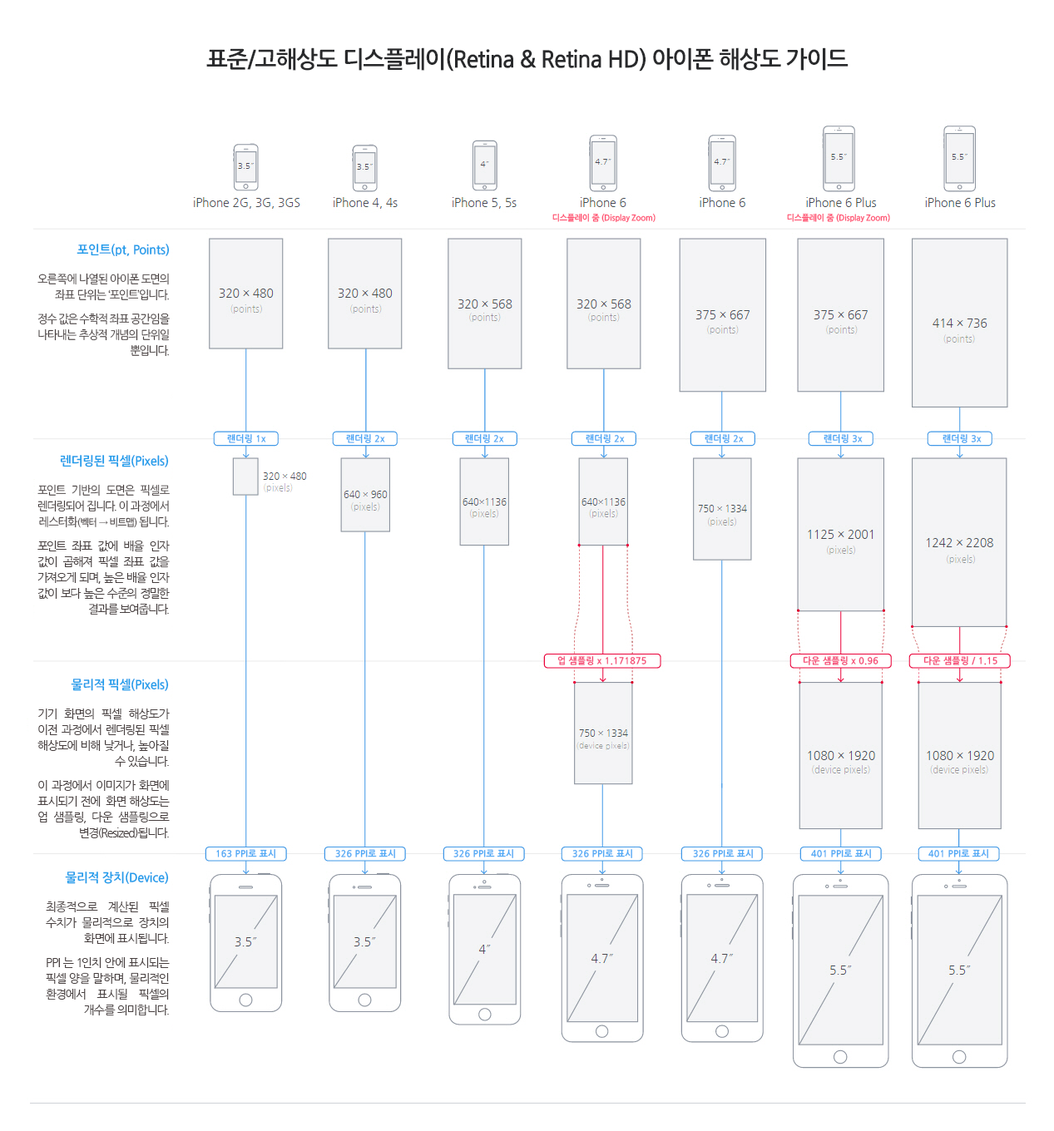
<style>
.page{position:relative;width:1054px;height:1131px;background:#ffffff}
.page>*{position:absolute;margin:0}
.t1{font:23.3px "NanumGothicBold";letter-spacing:-0.04em;color:#292a2c}
.t2{font:8.3px "NanumGothicBold";letter-spacing:-0.02em;color:#ff5273}
.t3{font:12.5px "NanumGothicBold";letter-spacing:-0.02em;color:#219deb}
.t4{font:11.6px/15.8px "NanumGothic";letter-spacing:-0.061em;color:#473f3f;scale:0.94 1}
.t5{font:11.6px/15.8px "NanumGothic";letter-spacing:-0.05em;color:#473f3f;scale:0.94 1}
.t6{font:9.2px "NanumGothicBold";letter-spacing:0.02em;color:#4ea8f5}
.t7{font:11.6px/15.8px "NanumGothic";letter-spacing:-0.1em;color:#473f3f}
.t8{font:10px/15.8px "NanumGothic";letter-spacing:-0.05em;color:#473f3f;scale:0.94 1}
.t9{font:9.2px "NanumGothicBold";letter-spacing:0.02em;color:#f54974}
.t10{font:11.6px/15.8px "NanumGothic";letter-spacing:-0.07em;color:#473f3f}
.t11{font:11.6px/15.8px "NanumGothic";letter-spacing:-0.06em;color:#473f3f}
</style>
<div class="page">
<p class="t1" style="left:206px;top:47px;width:643px;height:25px">표준/고해상도 디스플레이(Retina &amp; Retina HD) 아이폰 해상도 가이드</p>
<p class="t2" style="left:552px;top:213px;width:104px;height:10px">디스플레이 줌 (Display Zoom)</p>
<p class="t2" style="left:787px;top:213px;width:103px;height:10px">디스플레이 줌 (Display Zoom)</p>
<p class="t3" style="left:77px;top:244px;width:93px;height:12px">포인트(pt, Points)</p>
<p class="t4" style="left:37px;top:273px;width:133px;height:84px;text-align:justify"><span class="t5">오른쪽에 나열된 아이폰 도면의 좌표 단위는 ‘포인트’입니다.<br></span>정수 값은 수학적 좌표 공간임을 나타내는 추상적 개념의 단위일 뿐입니다.</p>
<p class="t6" style="left:227px;top:434px;width:39px;height:9px">랜더링 1x</p>
<p class="t6" style="left:346px;top:434px;width:39px;height:9px">랜더링 2x</p>
<p class="t6" style="left:465px;top:434px;width:39px;height:9px">랜더링 2x</p>
<p class="t6" style="left:586px;top:434px;width:39px;height:9px">랜더링 2x</p>
<p class="t6" style="left:705px;top:434px;width:39px;height:9px">랜더링 2x</p>
<p class="t6" style="left:824px;top:434px;width:39px;height:9px">랜더링 3x</p>
<p class="t6" style="left:943px;top:434px;width:39px;height:9px">랜더링 3x</p>
<p class="t3" style="left:60px;top:455px;width:109px;height:13px">렌더링된 픽셀(Pixels)</p>
<p class="t7" style="left:37px;top:484px;width:133px;height:132px;text-align:justify"><span class="t5">포인트 기반의 도면은 픽셀로 렌더링되어 집니다. 이 과정에서 레스터화</span><span class="t8">(벡터 → 비트맵) </span><span class="t5">됩니다.<br></span>포인트 좌표 값에 배율 인자 값이 곱해져 픽셀 좌표 값을 가져오게 되며, 높은 배율 인자 값이 보다 높은 수준의 정밀한 결과를 보여줍니다.</p>
<p class="t9" style="left:557px;top:656px;width:89px;height:10px">업 샘플링 x 1.171875</p>
<p class="t9" style="left:803px;top:656px;width:75px;height:10px">다운 샘플링 x 0.96</p>
<p class="t9" style="left:923px;top:656px;width:74px;height:10px">다운 샘플링 / 1.15</p>
<p class="t3" style="left:71px;top:679px;width:98px;height:12px">물리적 픽셀(Pixels)</p>
<p class="t10" style="left:37px;top:709px;width:133px;height:130px;text-align:justify">기기 화면의 픽셀 해상도가 이전 과정에서 렌더링된 픽셀 해상도에 비해 낮거나, 높아질 수 있습니다.<br>이 과정에서 이미지가 화면에 표시되기 전에  화면 해상도는 업 샘플링, 다운 샘플링으로 변경(Resized)됩니다.</p>
<p class="t6" style="left:216px;top:849px;width:59px;height:9px">163 PPI로 표시</p>
<p class="t6" style="left:335px;top:849px;width:60px;height:9px">326 PPI로 표시</p>
<p class="t6" style="left:453px;top:849px;width:60px;height:9px">326 PPI로 표시</p>
<p class="t6" style="left:572px;top:849px;width:60px;height:9px">326 PPI로 표시</p>
<p class="t6" style="left:693px;top:849px;width:60px;height:9px">326 PPI로 표시</p>
<p class="t6" style="left:811px;top:849px;width:60px;height:9px">401 PPI로 표시</p>
<p class="t6" style="left:928px;top:849px;width:60px;height:9px">401 PPI로 표시</p>
<p class="t3" style="left:65px;top:872px;width:104px;height:12px">물리적 장치(Device)</p>
<p class="t11" style="left:46px;top:901px;width:124px;height:116px;text-align:justify">최종적으로 계산된 픽셀 수치가 물리적으로 장치의 화면에 표시됩니다.<br>PPI 는 1인치 안에 표시되는 픽셀 양을 말하며, 물리적인 환경에서 표시될 픽셀의 개수를 의미합니다.</p>
</div>
